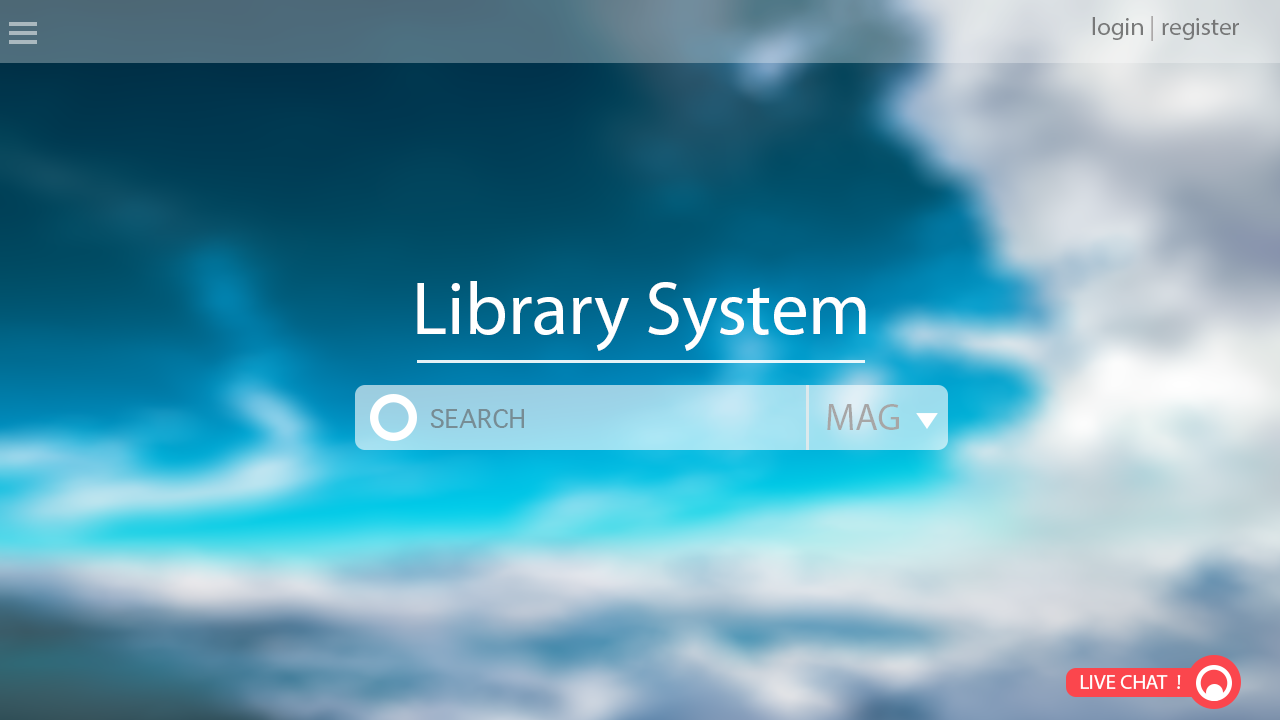
<style>
.page{position:relative;width:1280px;height:720px}
.page>*{position:absolute;margin:0}
.t1{font:25px "MyriadPro-Regular";color:#646464}
.t2{font:25px "MyriadPro-Regular";color:#a29e9e}
.t3{font:75px "MyriadPro-Regular";color:#ffffff}
.t4{font:25px "Thonburi";color:#778d94}
.t5{font:37.5px "MyriadPro-Regular";color:#a7a6a6}
.t6{font:20.8px "MyriadPro-Regular";color:#ffffff}
</style>
<div class="page">
<p class="t1" style="left:1092px;top:16px;width:147px;height:25px;opacity:0.88">login<span class="t2"> | </span>register</p>
<p class="t3" style="left:417px;top:281px;width:449px;height:70px">Library System</p>
<p class="t4" style="left:430px;top:409px;width:94px;height:19px">SEARCH</p>
<p class="t5" style="left:827px;top:404px;width:72px;height:26px">MAG</p>
<p class="t6" style="left:1080px;top:675px;width:101px;height:14px">LIVE CHAT  !</p>
</div>
